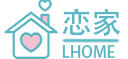
<style>
.page{position:relative;width:128px;height:59px;background:#ffffff}
.page>*{position:absolute;margin:0}
.t1{font:16px/30px "AdobeHeitiStd-Regular";color:#5cb7c2}
.t2{font:30px/36px "AdobeHeitiStd-Regular";color:#5cb7c2}
</style>
<div class="page">
<p class="t1" style="left:62px;top:8px;width:58px;height:50px"><span class="t2">恋家<br></span>LHOME</p>
</div>
